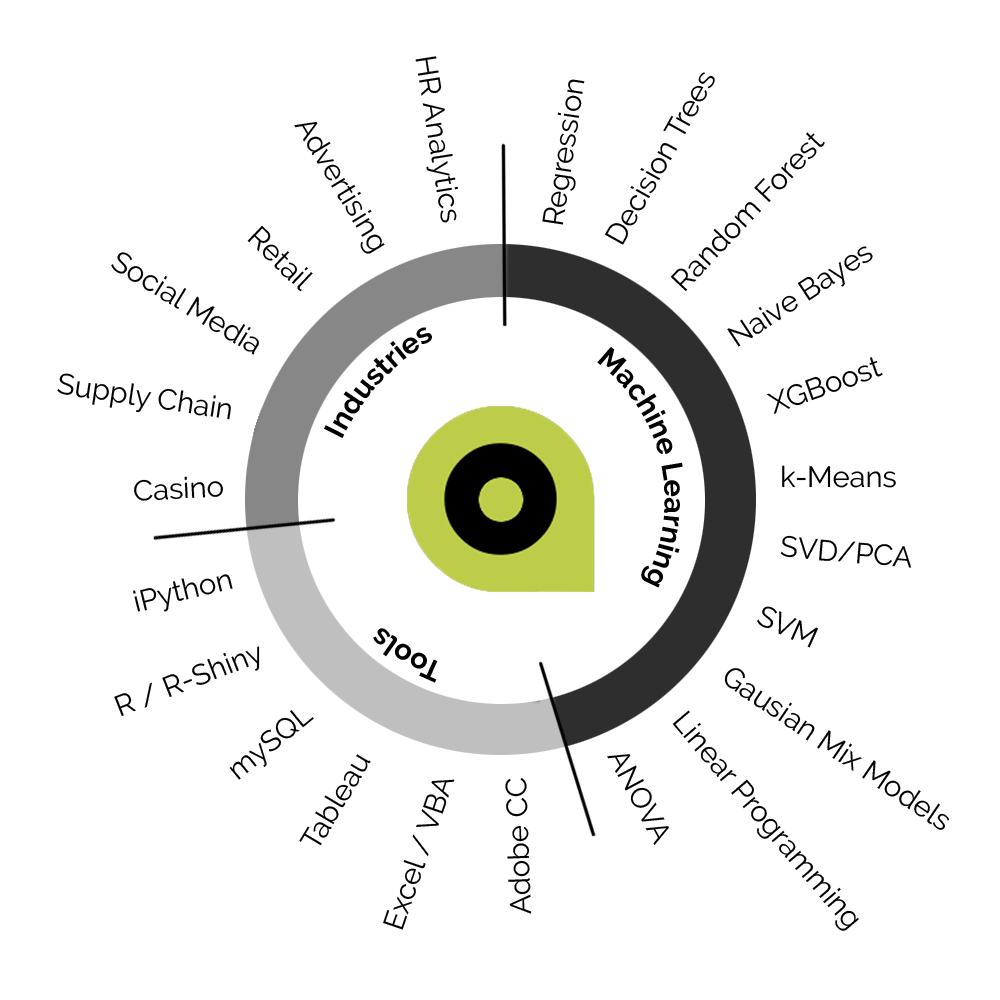
<style>
.page{position:relative;width:1000px;height:1000px;background:#ffffff}
.page>*{position:absolute;margin:0}
.t1{font:29.2px "Raleway-Regular";color:#000000}
.t2{font:29.2px "Raleway-Bold";color:#000000}
.t3{font:28.8px "Raleway-Regular";color:#000000}
</style>
<div class="page">
<p class="t1" style="left:415px;top:56px;width:43px;height:167px;rotate:81deg">HR Analytics</p>
<p class="t1" style="left:605px;top:72px;width:110px;height:173px;rotate:-61deg">Decision Trees</p>
<p class="t1" style="left:542px;top:79px;width:43px;height:146px;rotate:-82deg">Regression</p>
<p class="t1" style="left:294px;top:122px;width:91px;height:132px;rotate:59deg">Advertising</p>
<p class="t1" style="left:670px;top:132px;width:155px;height:159px;rotate:-47deg">Random Forest</p>
<p class="t1" style="left:247px;top:225px;width:66px;height:67px;rotate:44deg">Retail</p>
<p class="t1" style="left:727px;top:246px;width:146px;height:101px;rotate:-33deg">Naive Bayes</p>
<p class="t1" style="left:111px;top:252px;width:148px;height:103px;rotate:31deg">Social Media</p>
<p class="t2" style="left:324px;top:327px;width:108px;height:111px;rotate:164deg">Industries</p>
<p class="t2" style="left:597px;top:346px;width:86px;height:242px;text-align:justify;rotate:-134deg">Machine Learning  <br><br><br><br><br><br><br><br><br>Tools  Industries</p>
<p class="t1" style="left:766px;top:357px;width:117px;height:57px;rotate:-20deg">XGBoost</p>
<p class="t1" style="left:57px;top:373px;width:174px;height:47px;rotate:9deg">Supply Chain</p>
<p class="t1" style="left:782px;top:465px;width:114px;height:23px">k-Means</p>
<p class="t3" style="left:134px;top:476px;width:89px;height:25px;rotate:-3deg">Casino</p>
<p class="t1" style="left:780px;top:535px;width:132px;height:33px;rotate:5deg">SVD/PCA</p>
<p class="t1" style="left:133px;top:574px;width:100px;height:38px;rotate:-14deg">iPython</p>
<p class="t1" style="left:757px;top:606px;width:61px;height:42px;rotate:24deg">SVM</p>
<p class="t2" style="left:373px;top:628px;width:65px;height:55px;rotate:68deg">Tools</p>
<p class="t1" style="left:114px;top:646px;width:146px;height:70px;rotate:-22deg">R / R-Shiny</p>
<p class="t1" style="left:724px;top:668px;width:226px;height:162px;rotate:34deg">Gausian Mix Models</p>
<p class="t1" style="left:229px;top:710px;width:85px;height:70px;rotate:-39deg">mySQL</p>
<p class="t1" style="left:672px;top:710px;width:187px;height:221px;rotate:50deg">Linear Programming</p>
<p class="t1" style="left:299px;top:754px;width:72px;height:92px;rotate:-59deg">Tableau</p>
<p class="t1" style="left:607px;top:754px;width:62px;height:91px;rotate:62deg">ANOVA</p>
<p class="t1" style="left:383px;top:779px;width:72px;height:151px;rotate:-71deg">Excel / VBA</p>
<p class="t1" style="left:505px;top:778px;width:27px;height:136px;rotate:-92deg">Adobe CC</p>
</div>
